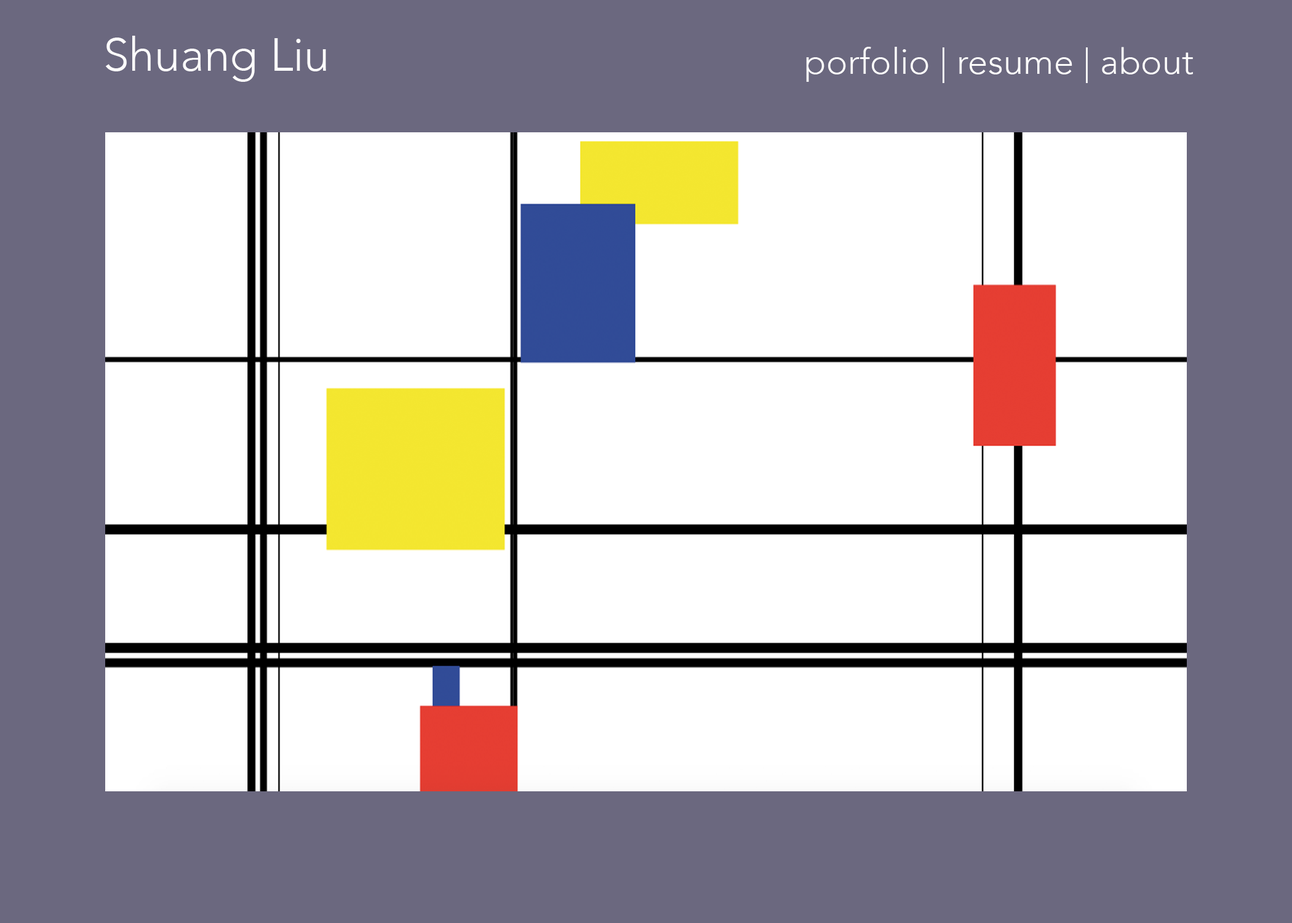
<style>
.page{position:relative;width:1292px;height:923px;background:#ffffff}
.page>*{position:absolute;margin:0}
.t1{font:46.1px "Avenir-Light";color:#fdfcfc}
.t2{font:35.9px "Avenir-Light";color:#fdfcfc}
</style>
<div class="page">
<p class="t1" style="left:105px;top:36px;width:221px;height:46px">Shuang Liu</p>
<p class="t2" style="left:806px;top:47px;width:387px;height:36px">porfolio | resume | about</p>
</div>
